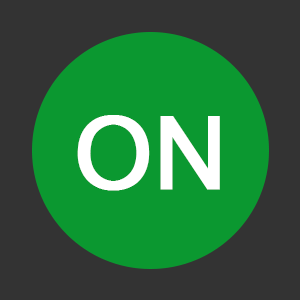
<style>
.page{position:relative;width:300px;height:300px;background:#333333}
.page>*{position:absolute;margin:0}
.t1{font:100px "ArialMT";color:#ffffff;font-weight:bold}
</style>
<div class="page">
<p class="t1" style="left:77px;top:115px;width:143px;height:76px">ON</p>
</div>
